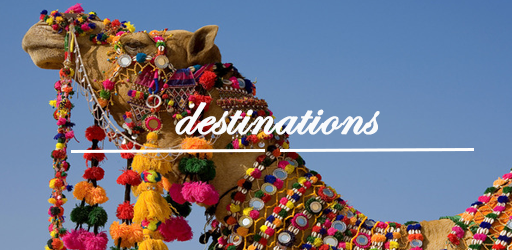
<style>
.page{position:relative;width:512px;height:250px}
.page>*{position:absolute;margin:0}
.t1{font:60px "EdwardianScriptITC";color:#f9fafb;font-weight:bold}
</style>
<div class="page">
<p class="t1" style="left:175px;top:102px;width:205px;height:33px">destinations</p>
</div>
